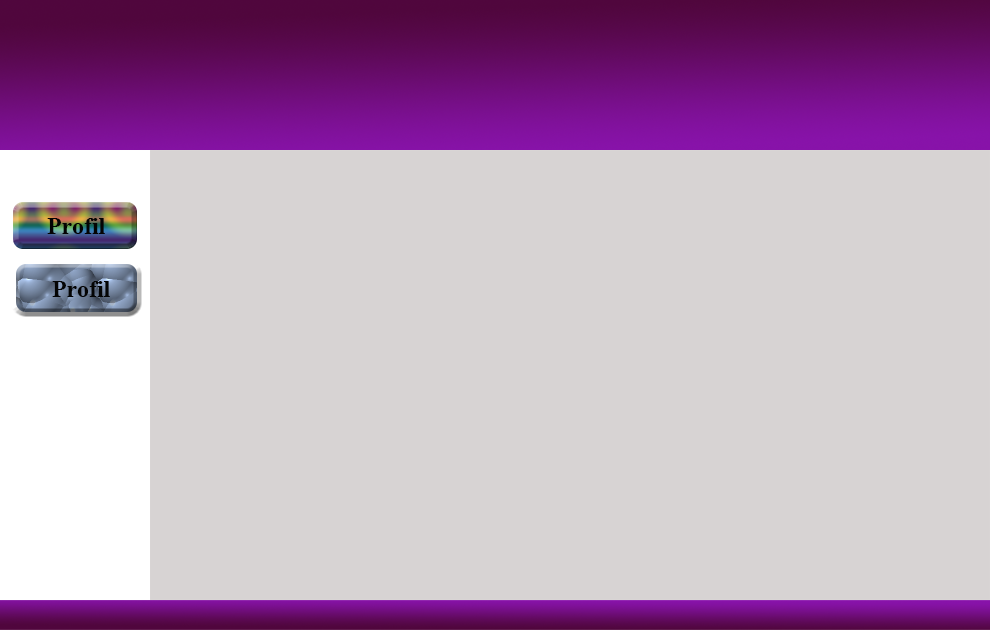
<style>
.page{position:relative;width:990px;height:630px;background:#d7d3d3}
.page>*{position:absolute;margin:0}
.t1{font:24px "TimesNewRomanPS-BoldMT";color:#040404}
</style>
<div class="page">
<p class="t1" style="left:47px;top:218px;width:58px;height:16px">Profil</p>
<p class="t1" style="left:52px;top:281px;width:58px;height:16px">Profil</p>
</div>
